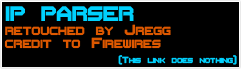
<style>
.page{position:relative;width:241px;height:69px;background:#000000}
.page>*{position:absolute;margin:0}
.t1{font:18.7px "Flipbash";color:#00d1fe}
.t2{font:13.3px "Flipbash";color:#dd5800}
.t3{font:8px "Flipbash";color:#00d1fe}
</style>
<div class="page">
<p class="t1" style="left:5px;top:6px;width:129px;height:15px">IP PARSER</p>
<p class="t2" style="left:5px;top:24px;width:166px;height:12px">retouched by Jregg</p>
<p class="t2" style="left:4px;top:37px;width:157px;height:12px">credit to Firewires</p>
<p class="t3" style="left:118px;top:55px;width:119px;height:10px">(This link does nothing)</p>
</div>
